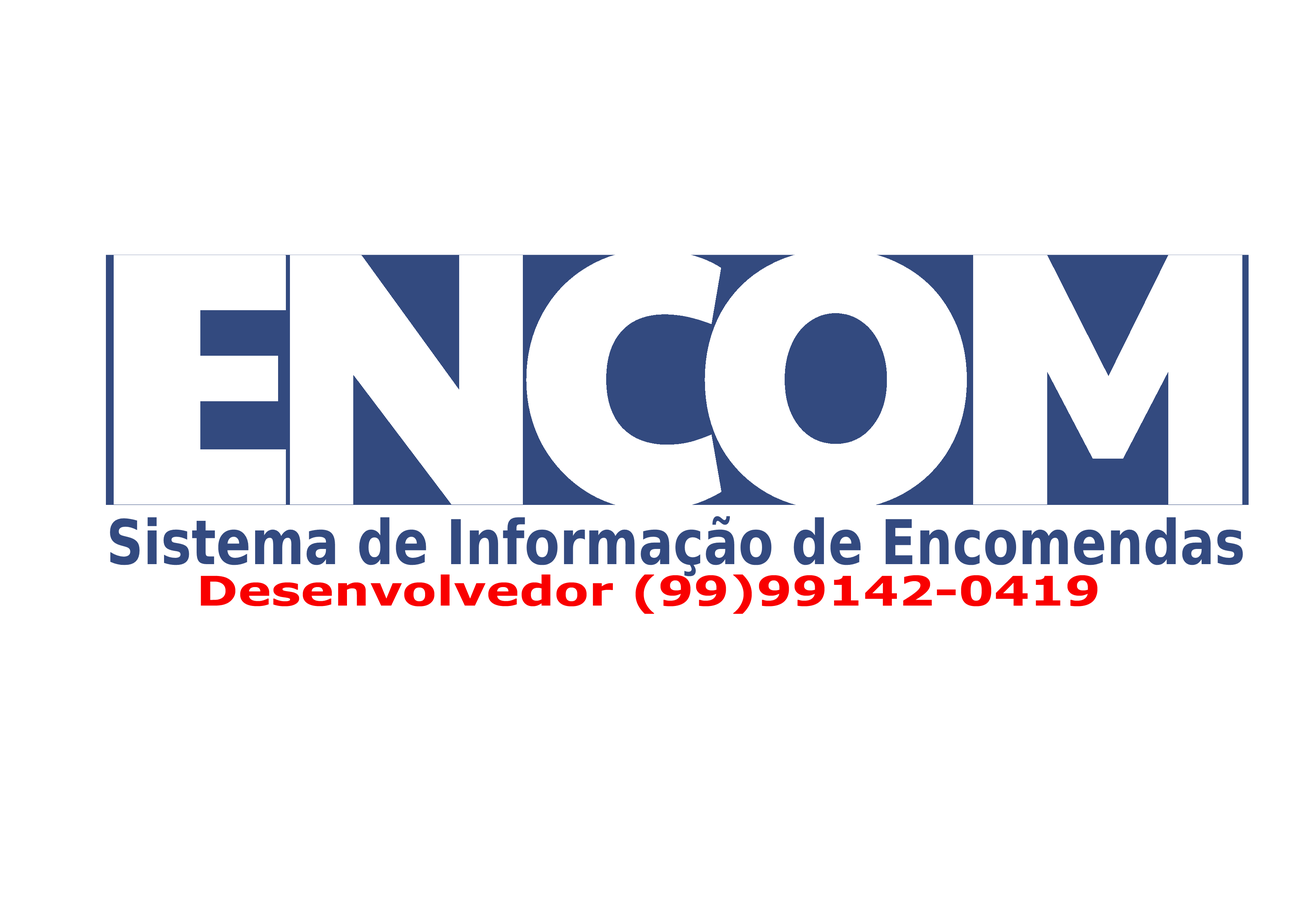
<style>
.page{position:relative;width:1299px;height:918px;background:#ffffff}
.page>*{position:absolute;margin:0}
.t1{font:362.4px "PaytoneOne-Regular";color:#ffffff}
.t2{font:61.7px "Verdana-Bold";color:#334a80;scale:0.83 1}
.t3{font:41px "Verdana-Bold";color:#f90000;scale:1.22 1}
</style>
<div class="page">
<p class="t1" style="left:114px;top:255px;width:172px;height:250px">E</p>
<p class="t1" style="left:290px;top:255px;width:233px;height:250px">N</p>
<p class="t1" style="left:526px;top:250px;width:196px;height:261px">C</p>
<p class="t1" style="left:705px;top:249px;width:262px;height:261px">O</p>
<p class="t1" style="left:973px;top:255px;width:269px;height:250px">M</p>
<p class="t2" style="left:110px;top:516px;width:1133px;height:60px">Sistema de Informação de Encomendas</p>
<p class="t3" style="left:201px;top:575px;width:896px;height:39px">Desenvolvedor (99)99142-0419</p>
</div>
